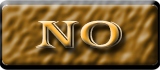
<style>
.page{position:relative;width:160px;height:70px}
.page>*{position:absolute;margin:0}
.t1{font:40.4px "Algerian";color:#fea916;scale:1.76 1}
</style>
<div class="page">
<p class="t1" style="left:35px;top:20px;width:87px;height:29px">No</p>
</div>
